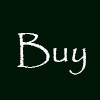
<style>
.page{position:relative;width:100px;height:100px;background:#011607}
.page>*{position:absolute;margin:0}
.t1{font:36px "Papyrus-Regular";color:#fdfdfd}
</style>
<div class="page">
<p class="t1" style="left:17px;top:33px;width:69px;height:42px">Buy</p>
</div>
